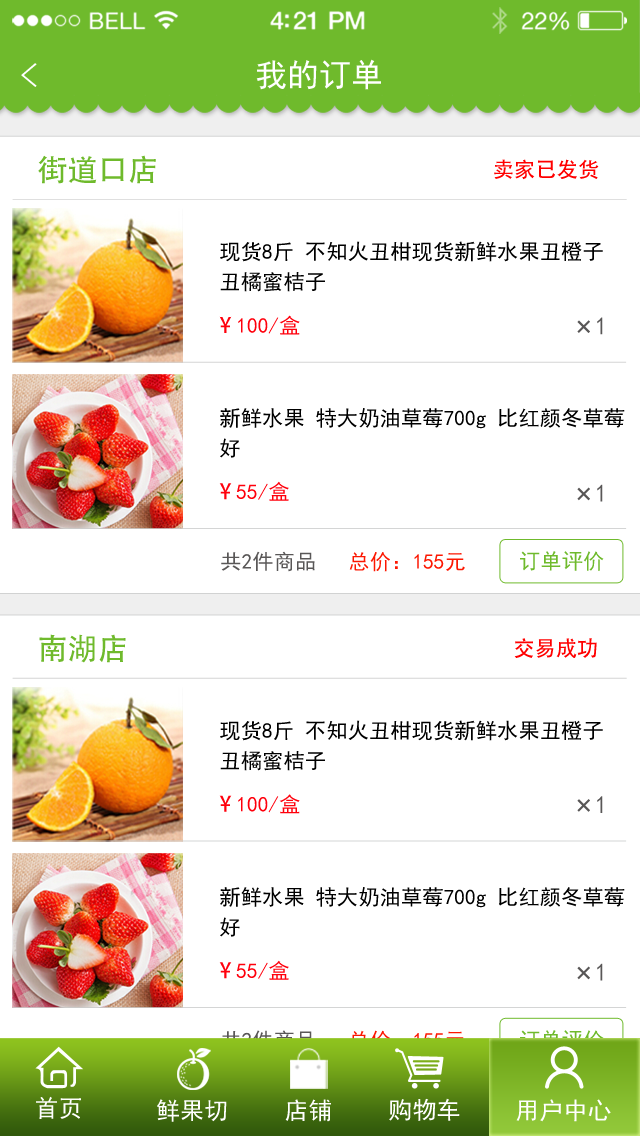
<style>
.page{position:relative;width:640px;height:1136px;background:#ffffff}
.page>*{position:absolute;margin:0}
.t1{font:33.8px "SimHei";color:#ffffff;scale:1.07 1}
.t2{font:32px "SimHei";color:#ffffff}
.t3{font:30.3px "AdobeHeitiStd-Regular";color:#6fba2c}
.t4{font:21.4px "AdobeHeitiStd-Regular";color:#ff0000}
.t5{font:21.4px/30.3px "SimHei";color:#000000}
.t6{font:21.4px "SimHei";color:#ff000c}
.t7{font:21.4px "AdobeHeitiStd-Regular";color:#ff000c}
.t8{font:24.8px "SimHei";color:#595757}
.t9{font:35.4px "SimHei";color:#595757}
.t10{font:21.4px "SimHei";color:#fc1701}
.t11{font:21.4px "SimHei";color:#595757}
.t12{font:21.4px "SimHei";color:#6fba2c}
.t13{font:21.4px "SimHei"}
.t14{font:24.1px "SimHei";color:#ffffff}
</style>
<div class="page">
<p class="t1" style="left:21px;top:63px;width:16px;height:24px;rotate:180deg">&gt;</p>
<p class="t2" style="left:256px;top:59px;width:125px;height:31px">我的订单</p>
<p class="t3" style="left:38px;top:155px;width:118px;height:29px">街道口店</p>
<p class="t4" style="left:494px;top:159px;width:105px;height:21px">卖家已发货</p>
<p class="t5" style="left:220px;top:241px;width:383px;height:51px">现货8斤 不知火丑柑现货新鲜水果丑橙子 <br>丑橘蜜桔子</p>
<p class="t6" style="left:219px;top:315px;width:81px;height:20px"><span class="t7">¥ </span>100/盒</p>
<p class="t8" style="left:597px;top:317px;width:6px;height:18px">1</p>
<p class="t9" style="left:577px;top:320px;width:13px;height:13px;rotate:135deg">+</p>
<p class="t5" style="left:220px;top:408px;width:405px;height:50px">新鲜水果 特大奶油草莓700g 比红颜冬草莓<br>好</p>
<p class="t6" style="left:219px;top:481px;width:70px;height:20px"><span class="t7">¥ </span>55/盒</p>
<p class="t8" style="left:597px;top:484px;width:6px;height:18px">1</p>
<p class="t9" style="left:577px;top:487px;width:13px;height:14px;rotate:135deg">+</p>
<p class="t10" style="left:221px;top:551px;width:244px;height:21px"><span class="t11">共2件商品   </span>总价：155元</p>
<p class="t12" style="left:520px;top:551px;width:84px;height:20px">订单评价</p>
<p class="t3" style="left:39px;top:634px;width:87px;height:29px">南湖店</p>
<p class="t4" style="left:514px;top:638px;width:83px;height:20px">交易成功</p>
<p class="t5" style="left:220px;top:720px;width:383px;height:51px">现货8斤 不知火丑柑现货新鲜水果丑橙子 <br>丑橘蜜桔子</p>
<p class="t6" style="left:219px;top:794px;width:81px;height:20px"><span class="t7">¥ </span>100/盒</p>
<p class="t8" style="left:597px;top:796px;width:6px;height:17px">1</p>
<p class="t9" style="left:577px;top:799px;width:13px;height:13px;rotate:135deg">+</p>
<p class="t5" style="left:220px;top:887px;width:405px;height:50px">新鲜水果 特大奶油草莓700g 比红颜冬草莓<br>好</p>
<p class="t6" style="left:219px;top:960px;width:70px;height:20px"><span class="t7">¥ </span>55/盒</p>
<p class="t9" style="left:577px;top:966px;width:13px;height:14px;rotate:135deg">+</p>
<p class="t8" style="left:597px;top:963px;width:6px;height:18px">1</p>
<p class="t13" style="left:221px;top:1030px;width:244px;height:20px">共2件商品   总价：155元</p>
<p class="t12" style="left:520px;top:1030px;width:84px;height:20px">订单评价</p>
<p class="t14" style="left:36px;top:1096px;width:45px;height:23px">首页</p>
<p class="t14" style="left:157px;top:1099px;width:70px;height:23px">鲜果切</p>
<p class="t14" style="left:285px;top:1099px;width:46px;height:23px">店铺</p>
<p class="t14" style="left:389px;top:1098px;width:71px;height:23px">购物车</p>
<p class="t14" style="left:516px;top:1099px;width:95px;height:23px">用户中心</p>
</div>
